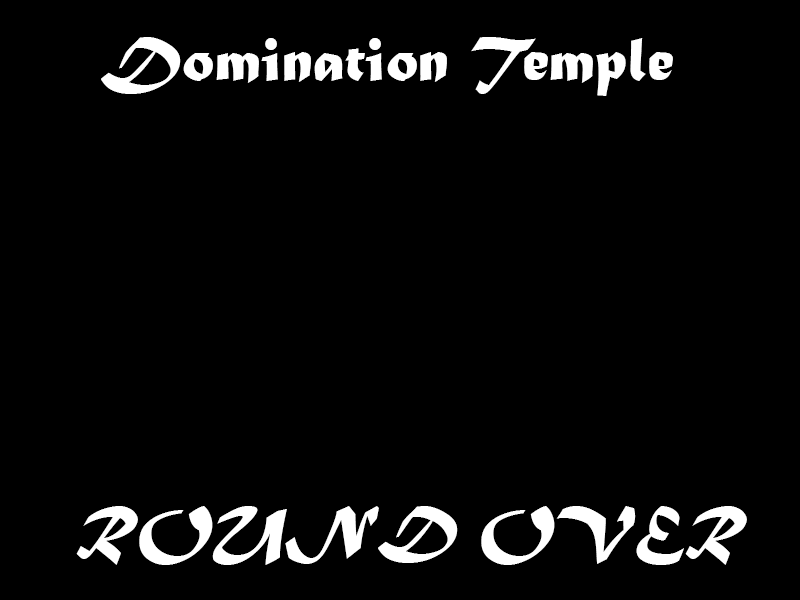
<style>
.page{position:relative;width:800px;height:600px;background:#000000}
.page>*{position:absolute;margin:0}
.t1{font:65px "MaturaMTScriptCapitals";color:#ffffff}
</style>
<div class="page">
<p class="t1" style="left:101px;top:37px;width:572px;height:59px">Domination Temple</p>
<p class="t1" style="left:76px;top:506px;width:671px;height:59px">ROUND OVER</p>
</div>
